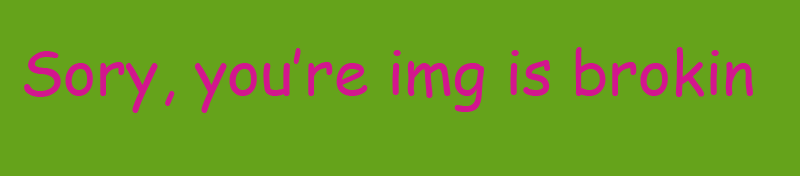
<style>
.page{position:relative;width:800px;height:176px;background:#65a31b}
.page>*{position:absolute;margin:0}
.t1{font:62.5px "ComicSansMS";color:#d2168e}
</style>
<div class="page">
<p class="t1" style="left:24px;top:47px;width:729px;height:66px">Sory, you’re img is brokin</p>
</div>
